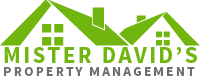
<style>
.page{position:relative;width:200px;height:77px;background:#ffffff}
.page>*{position:absolute;margin:0}
.t1{font:13.6px/13.6px "SourceSansPro-Bold";letter-spacing:0.16em;color:#6d6e71}
.t2{font:23.4px/17.5px "SourceSansPro-Bold";letter-spacing:0.1em;color:#71b60f}
</style>
<div class="page">
<p class="t1" style="left:4px;top:47px;width:193px;height:29px"><span class="t2">MISTER DAVID’S<br></span>PROPERTY MANAGEMENT</p>
</div>
